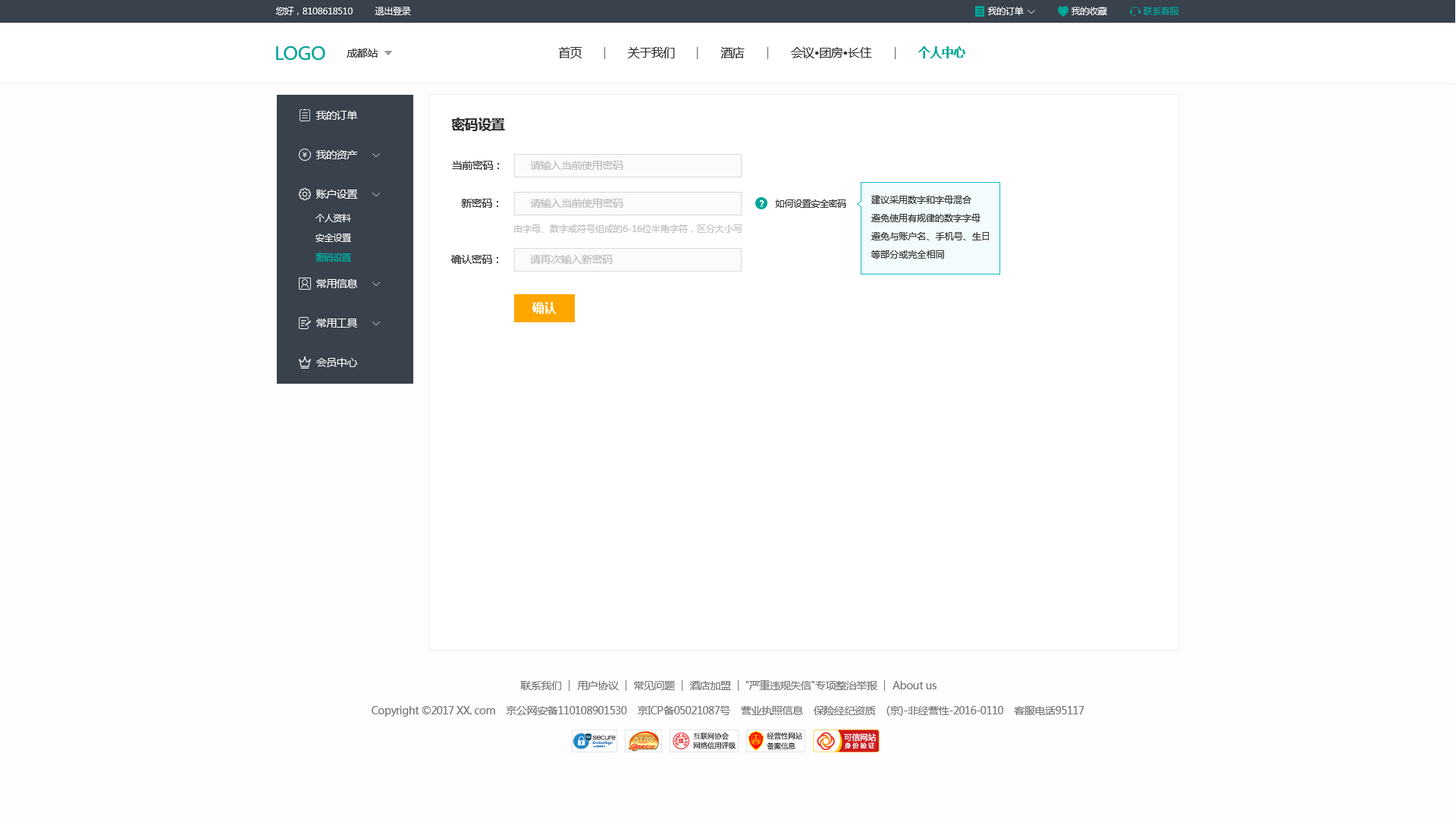
<style>
.page{position:relative;width:1456px;height:819px;background:#fefefe}
.page>*{position:absolute;margin:0}
.t1{font:9.1px "MicrosoftYaHei";letter-spacing:-0.03em;color:#ffffff}
.t2{font:9.1px "MicrosoftYaHei";letter-spacing:-0.03em;color:#00a699}
.t3{font:18.2px "MicrosoftYaHei";letter-spacing:-0.03em;color:#00a699}
.t4{font:10.6px "MicrosoftYaHei";letter-spacing:-0.03em;color:#333333}
.t5{font:12.1px "MicrosoftYaHei";letter-spacing:-0.03em;color:#333333}
.t6{font:12.1px "MicrosoftYaHei-Bold";letter-spacing:-0.03em;color:#00a699}
.t7{font:10.6px "MicrosoftYaHei";letter-spacing:-0.03em;color:#ffffff}
.t8{font:13.6px "MicrosoftYaHei-Bold";letter-spacing:-0.03em;color:#333333}
.t9{font:10.6px "MicrosoftYaHei";letter-spacing:-0.03em;color:#bbbbbb}
.t10{font:9.1px/18.2px "MicrosoftYaHei";color:#333333}
.t11{font:9.1px "MicrosoftYaHei-Bold";letter-spacing:-0.03em;color:#ffffff}
.t12{font:9.1px "MicrosoftYaHei";letter-spacing:-0.03em;color:#333333}
.t13{font:9.1px "MicrosoftYaHei";color:#bdbdbd}
.t14{font:9.1px "MicrosoftYaHei-Bold";letter-spacing:-0.03em;color:#00a699}
.t15{font:12.1px "MicrosoftYaHei-Bold";color:#ffffff}
.t16{font:10.6px "MicrosoftYaHei";letter-spacing:-0.03em;color:#777777}
</style>
<div class="page">
<p class="t1" style="left:276px;top:7px;width:77px;height:8px">您好，8108618510</p>
<p class="t1" style="left:375px;top:7px;width:36px;height:8px">退出登录</p>
<p class="t1" style="left:987px;top:7px;width:37px;height:8px">我的订单</p>
<p class="t1" style="left:1071px;top:7px;width:36px;height:8px">我的收藏</p>
<p class="t2" style="left:1144px;top:7px;width:35px;height:8px">联系客服</p>
<p class="t3" style="left:276px;top:46px;width:49px;height:14px">LOGO</p>
<p class="t4" style="left:347px;top:49px;width:31px;height:9px">成都站</p>
<p class="t5" style="left:558px;top:47px;width:24px;height:11px">首页</p>
<p class="t5" style="left:628px;top:47px;width:47px;height:11px">关于我们</p>
<p class="t5" style="left:720px;top:47px;width:25px;height:11px">酒店</p>
<p class="t5" style="left:791px;top:47px;width:81px;height:11px">会议•团房•长住</p>
<p class="t6" style="left:918px;top:46px;width:47px;height:12px">个人中心</p>
<p class="t7" style="left:315px;top:111px;width:43px;height:9px">我的订单</p>
<p class="t8" style="left:451px;top:118px;width:54px;height:13px">密码设置</p>
<p class="t7" style="left:315px;top:150px;width:43px;height:9px">我的资产</p>
<p class="t4" style="left:452px;top:161px;width:47px;height:9px">当前密码：</p>
<p class="t9" style="left:530px;top:161px;width:93px;height:9px">请输入当前使用密码</p>
<p class="t7" style="left:316px;top:190px;width:42px;height:9px">账户设置</p>
<p class="t10" style="left:871px;top:195px;width:118px;height:64px">建议采用数字和字母混合<br>避免使用有规律的数字字母<br>避免与账户名、手机号、生日等部分或完全相同</p>
<p class="t4" style="left:461px;top:199px;width:37px;height:9px">新密码：</p>
<p class="t9" style="left:530px;top:199px;width:93px;height:9px">请输入当前使用密码</p>
<p class="t11" style="left:760px;top:200px;width:4px;height:7px">?</p>
<p class="t12" style="left:775px;top:199px;width:71px;height:9px">如何设置安全密码</p>
<p class="t1" style="left:315px;top:214px;width:36px;height:8px">个人资料</p>
<p class="t1" style="left:315px;top:234px;width:36px;height:8px">安全设置</p>
<p class="t13" style="left:514px;top:224px;width:228px;height:9px">由字母、数字或符号组成的6-16位半角字符，区分大小写</p>
<p class="t14" style="left:315px;top:253px;width:36px;height:9px">密码设置</p>
<p class="t4" style="left:450px;top:255px;width:48px;height:9px">确认密码：</p>
<p class="t9" style="left:530px;top:255px;width:83px;height:9px">请再次输入新密码</p>
<p class="t7" style="left:316px;top:279px;width:42px;height:9px">常用信息</p>
<p class="t15" style="left:532px;top:302px;width:25px;height:12px">确认</p>
<p class="t7" style="left:316px;top:318px;width:42px;height:10px">常用工具</p>
<p class="t7" style="left:316px;top:358px;width:42px;height:9px">会员中心</p>
<p class="t16" style="left:520px;top:681px;width:41px;height:9px">联系我们</p>
<p class="t16" style="left:577px;top:681px;width:42px;height:9px">用户协议</p>
<p class="t16" style="left:634px;top:681px;width:41px;height:9px">常见问题</p>
<p class="t16" style="left:689px;top:681px;width:42px;height:9px">酒店加盟</p>
<p class="t16" style="left:745px;top:680px;width:132px;height:10px">"严重违规失信"专项整治举报</p>
<p class="t16" style="left:893px;top:681px;width:44px;height:8px">About us</p>
<p class="t16" style="left:372px;top:706px;width:712px;height:11px">Copyright ©2017 XX. com    京公网安备110108901530    京ICP备05021087号    营业执照信息    保险经纪资质    (京)-非经营性-2016-0110    客服电话95117</p>
</div>
